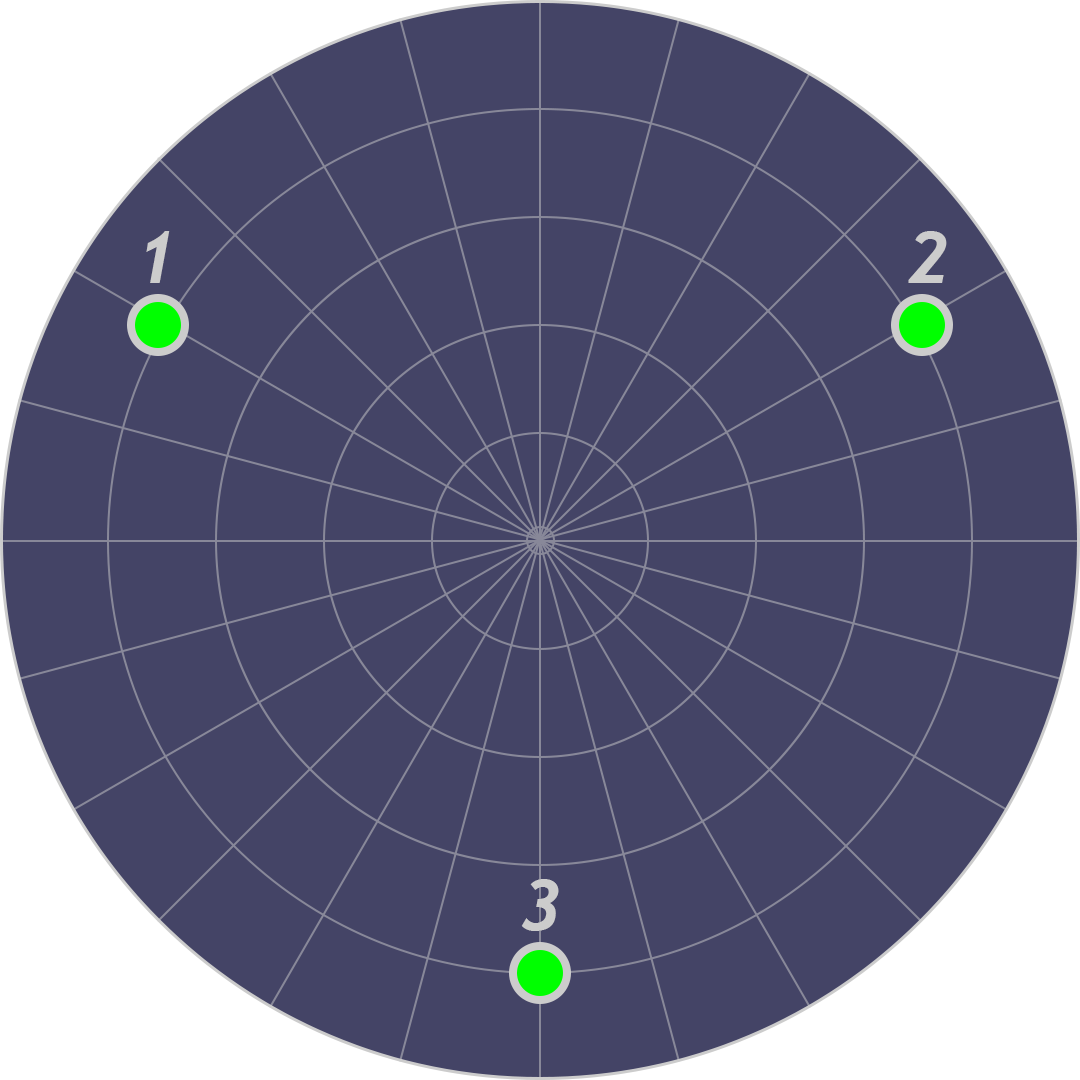
<style>
.page{position:relative;width:1080px;height:1080px;background:#444466}
.page>*{position:absolute;margin:0}
.t1{font:72px "Trebuchet-BoldItalic";color:#cccccc;text-transform:uppercase}
</style>
<div class="page">
<p class="t1" style="left:146px;top:231px;width:24px;height:52px">1</p>
<p class="t1" style="left:908px;top:231px;width:39px;height:52px">2</p>
<p class="t1" style="left:521px;top:879px;width:38px;height:52px">3</p>
</div>
